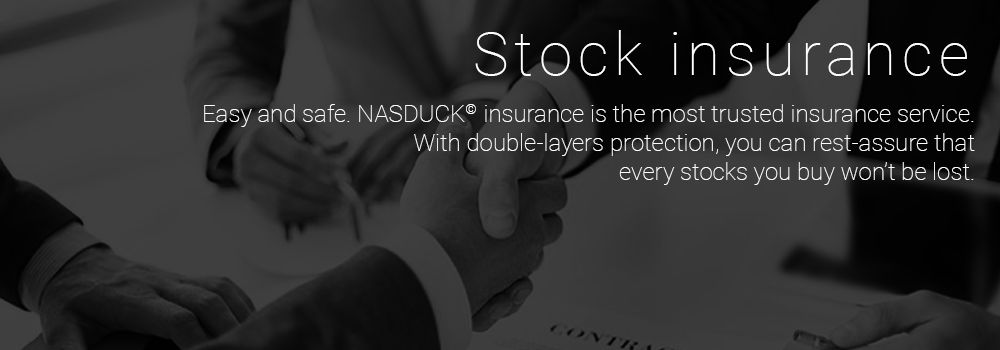
<style>
.page{position:relative;width:1000px;height:350px}
.page>*{position:absolute;margin:0}
.t1{font:60px "Roboto-Thin";letter-spacing:0.1em;color:#ffffff}
.t2{font:24px "Roboto-Thin";color:#ffffff}
</style>
<div class="page">
<p class="t1" style="left:475px;top:30px;width:492px;height:46px">Stock insurance</p>
<p class="t2" style="left:204px;top:104px;width:771px;height:81px;text-align:right">Easy and safe. NASDUCK©  insurance is the most trusted insurance service.<br>With double-layers protection, you can rest-assure that<br>every stocks you buy won’t be lost.</p>
</div>
